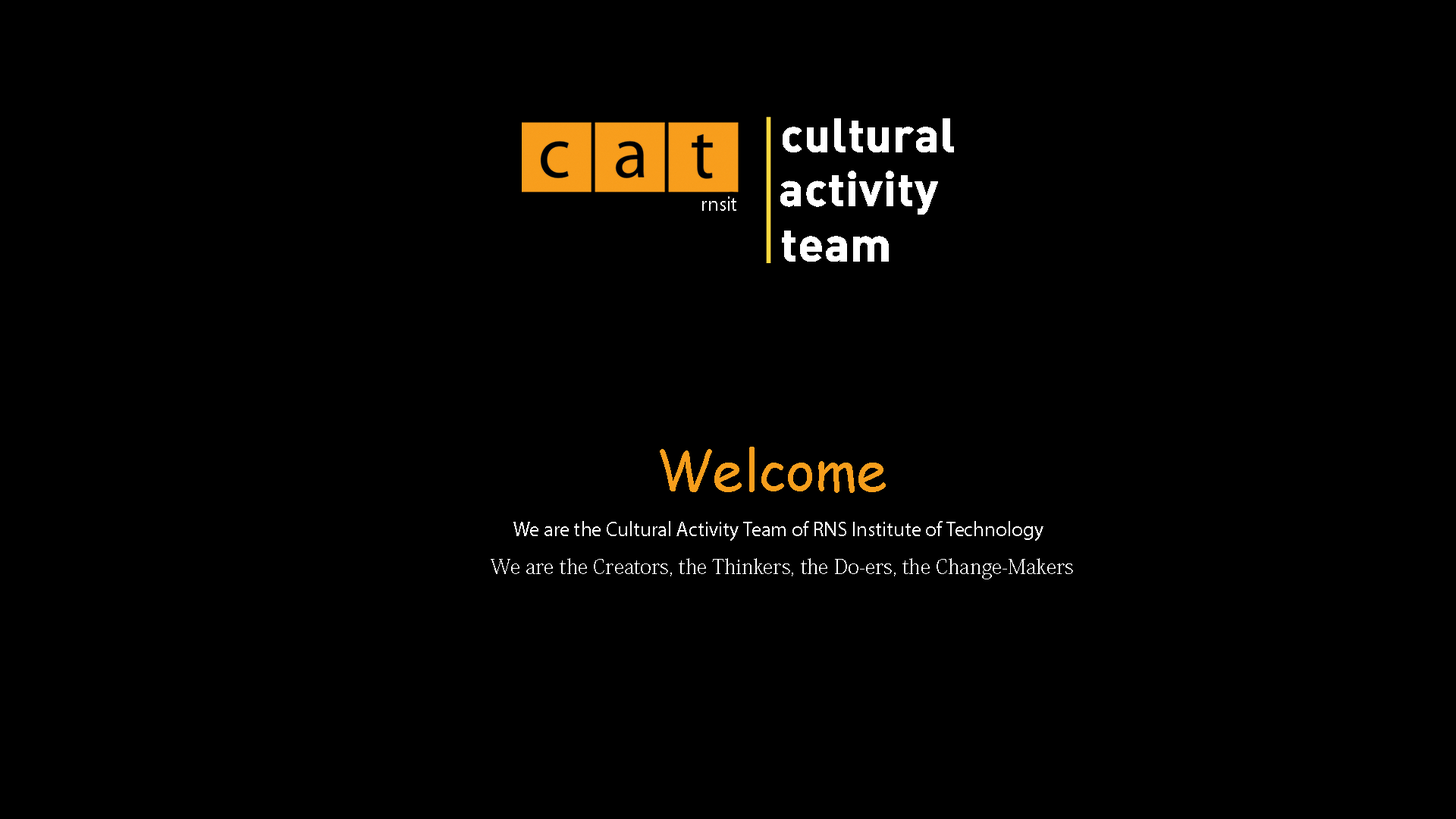
<style>
.page{position:relative;width:1456px;height:819px;background:#000000}
.page>*{position:absolute;margin:0}
.t1{font:20.5px "MyriadPro-Regular";color:#ffffff}
.t2{font:54.6px "ComicSansMS";color:#f79e1c}
.t3{font:20.5px "KozMinPro-ExtraLight";color:#ffffff}
</style>
<div class="page">
<p class="t1" style="left:702px;top:196px;width:34px;height:15px">rnsit</p>
<p class="t2" style="left:660px;top:447px;width:226px;height:46px">Welcome</p>
<p class="t1" style="left:513px;top:521px;width:530px;height:20px">We are the Cultural Activity Team of RNS Institute of Technology</p>
<p class="t3" style="left:491px;top:558px;width:582px;height:21px">We are the Creators, the Thinkers, the Do-ers, the Change-Makers</p>
</div>
